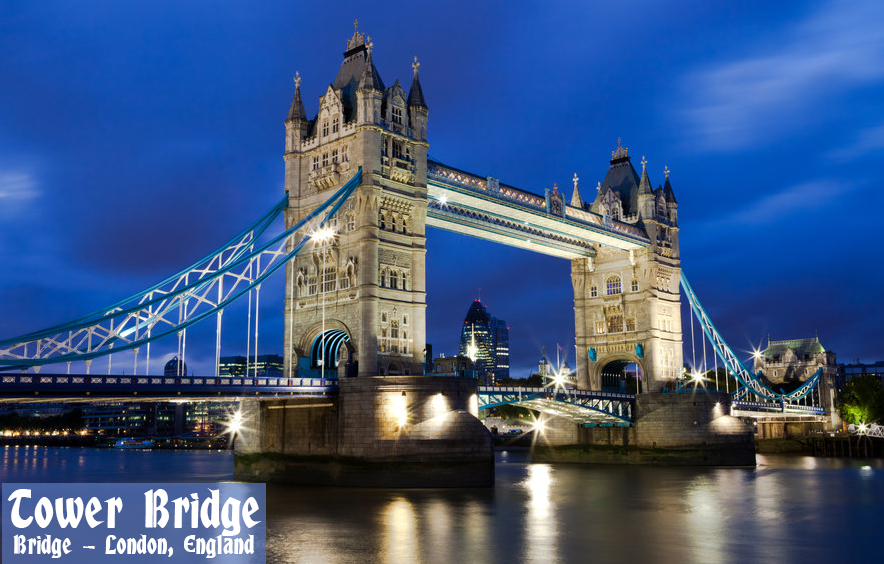
<style>
.page{position:relative;width:884px;height:564px}
.page>*{position:absolute;margin:0}
.t1{font:48px "AlbertText-Bold";color:#ffffff}
.t2{font:24px "AlbertText-Bold";color:#ffffff}
</style>
<div class="page">
<p class="t1" style="left:7px;top:488px;width:255px;height:48px">Tower Bridge</p>
<p class="t2" style="left:13px;top:534px;width:241px;height:24px">Bridge - London, England</p>
</div>
